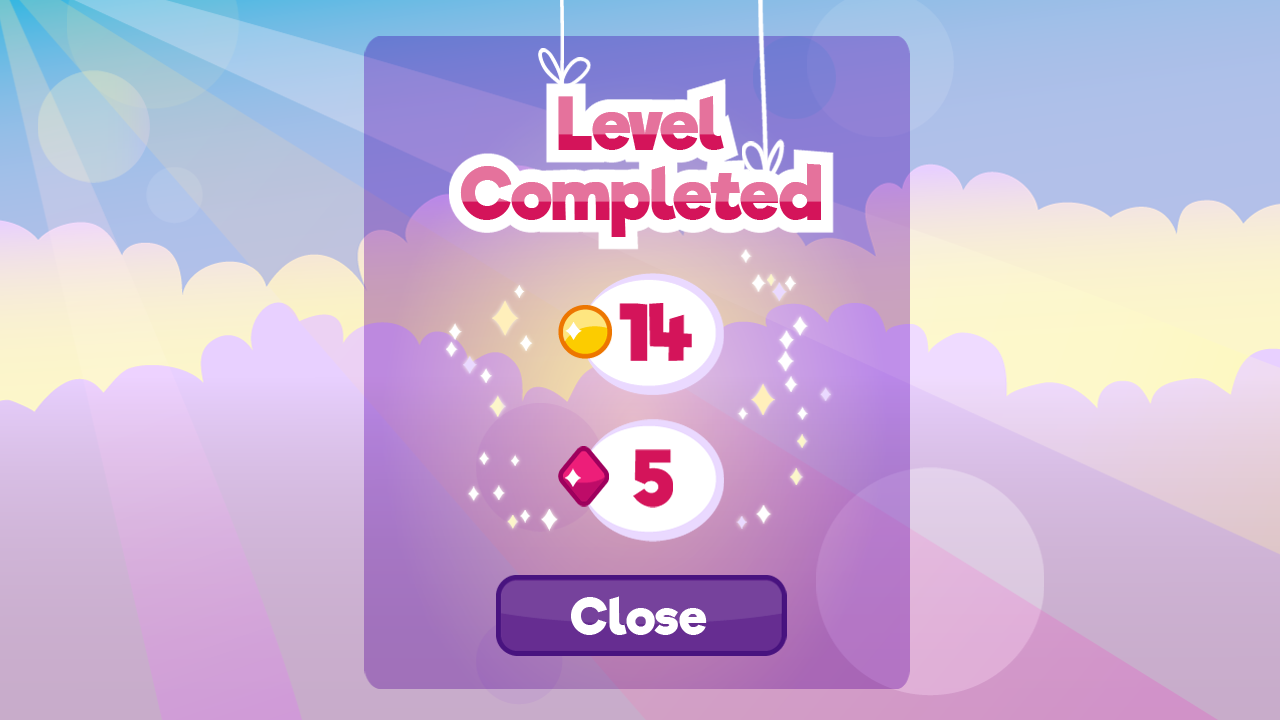
<style>
.page{position:relative;width:1280px;height:720px}
.page>*{position:absolute;margin:0}
.t1{font:70.2px/70.2px "RifficFree-Bold"}
.t2{font:50.1px "RifficFree-Bold";letter-spacing:0.025em;color:#ffffff}
</style>
<div class="page">
<p class="t1" style="left:460px;top:96px;width:361px;height:141px;text-align:center">Level <br>Completed</p>
<p class="t1" style="left:460px;top:96px;width:361px;height:141px;text-align:center">Level <br>Completed</p>
<p class="t2" style="left:571px;top:596px;width:136px;height:39px">Close</p>
</div>
